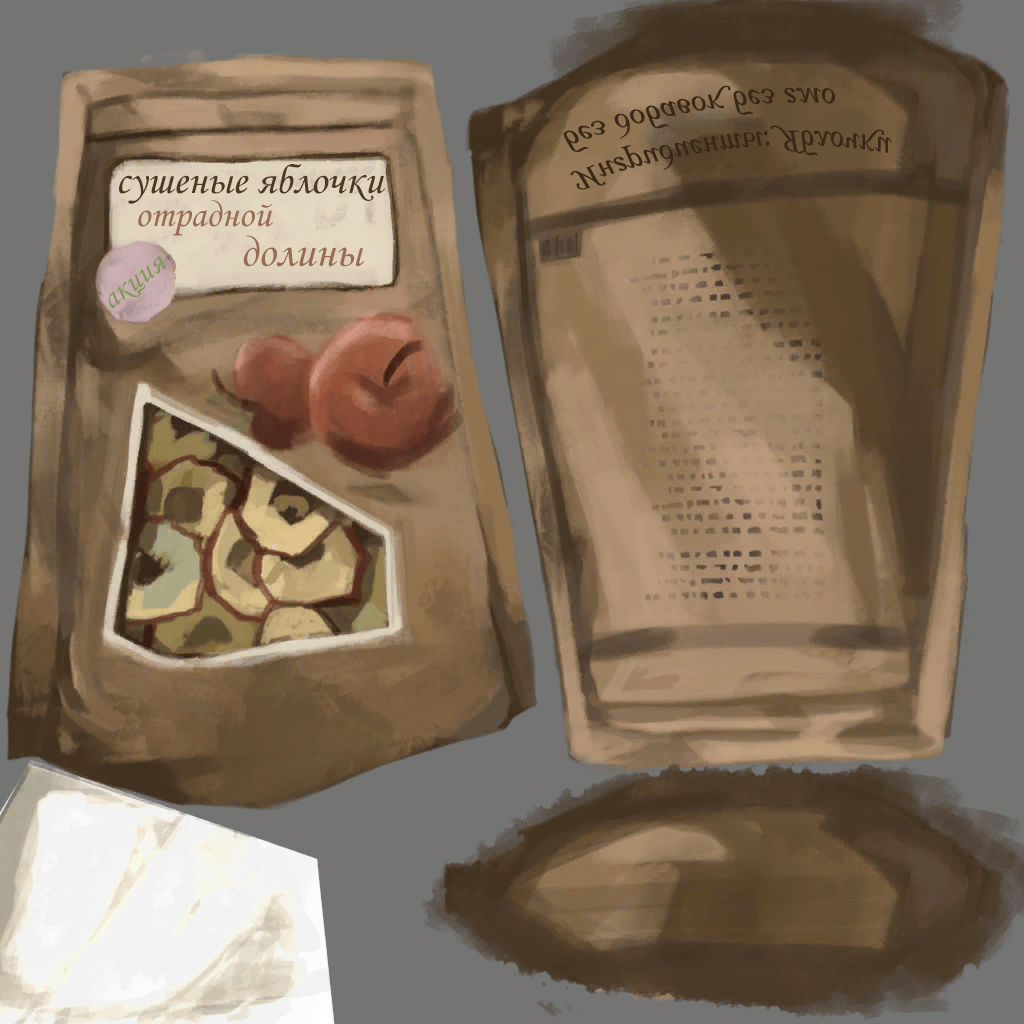
<style>
.page{position:relative;width:1024px;height:1024px}
.page>*{position:absolute;margin:0}
.t1{font:35.3px "MonotypeCorsiva";color:#392818}
.t2{font:42px "MonotypeCorsiva";color:#4a3821}
.t3{font:37.7px "MonotypeCorsiva";color:#996a55}
.t4{font:44.3px "MonotypeCorsiva";color:#996a55}
.t5{font:31.6px "MonotypeCorsiva";color:#7e9955}
</style>
<div class="page">
<p class="t1" style="left:563px;top:85px;width:329px;height:105px;rotate:-6deg">Ингридиенты: Яблочки<br>без добавок без гмо</p>
<p class="t2" style="left:119px;top:164px;width:266px;height:40px">сушеные яблочки</p>
<p class="t3" style="left:138px;top:200px;width:135px;height:36px">отрадной</p>
<p class="t4" style="left:243px;top:235px;width:122px;height:32px">долины</p>
<p class="t5" style="left:109px;top:256px;width:58px;height:52px;rotate:-38deg">акция</p>
</div>
